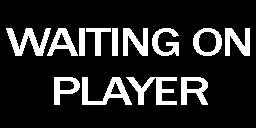
<style>
.page{position:relative;width:256px;height:128px;background:#010101}
.page>*{position:absolute;margin:0}
.t1{font:41px "FranklinGothic-Medium";letter-spacing:-0.05em;color:#ffffff;text-transform:uppercase;scale:1.25 1}
</style>
<div class="page">
<p class="t1" style="left:6px;top:28px;width:244px;height:77px;text-align:center">Waiting on<br>player</p>
</div>
